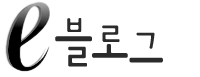
<style>
.page{position:relative;width:200px;height:77px;background:#ffffff}
.page>*{position:absolute;margin:0}
.t1{font:60px "PianoM";letter-spacing:-0.35em;color:#2b2b2b;scale:0.95 1}
</style>
<div class="page">
<p class="t1" style="left:55px;top:18px;width:108px;height:49px">블로그</p>
</div>
